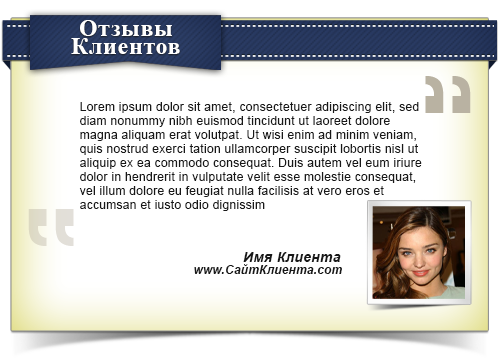
<style>
.page{position:relative;width:500px;height:360px;background:#ffffff}
.page>*{position:absolute;margin:0}
.t1{font:24px/18px "TimesNewRomanPS-BoldMT";letter-spacing:0.025em;color:#f2f2f2}
.t2{font:12px/14px "ArialMT";letter-spacing:0.025em;color:#181818}
.t3{font:13.8px "Arial-BoldItalicMT";letter-spacing:0.025em;color:#181818}
.t4{font:11.8px "Arial-BoldItalicMT";letter-spacing:0.025em;color:#181818}
</style>
<div class="page">
<p class="t1" style="left:71px;top:20px;width:109px;height:34px;text-align:center">Отзывы<br>Клиентов</p>
<p class="t2" style="left:79px;top:102px;width:343px;height:109px">Lorem ipsum dolor sit amet, consectetuer adipiscing elit, sed diam nonummy nibh euismod tincidunt ut laoreet dolore magna aliquam erat volutpat. Ut wisi enim ad minim veniam, quis nostrud exerci tation ullamcorper suscipit lobortis nisl ut aliquip ex ea commodo consequat. Duis autem vel eum iriure dolor in hendrerit in vulputate velit esse molestie consequat, vel illum dolore eu feugiat nulla facilisis at vero eros et accumsan et iusto odio dignissim</p>
<p class="t3" style="left:243px;top:252px;width:98px;height:10px">Имя Клиента</p>
<p class="t4" style="left:194px;top:264px;width:148px;height:10px">www.СайтКлиента.com</p>
</div>
